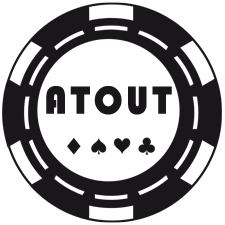
<style>
.page{position:relative;width:225px;height:225px;background:#ffffff}
.page>*{position:absolute;margin:0}
.t1{font:40.5px "Bauhaus93";letter-spacing:0.1em;color:#1a171b;scale:0.93 1}
</style>
<div class="page">
<p class="t1" style="left:46px;top:86px;width:126px;height:29px">ATOUT</p>
</div>
